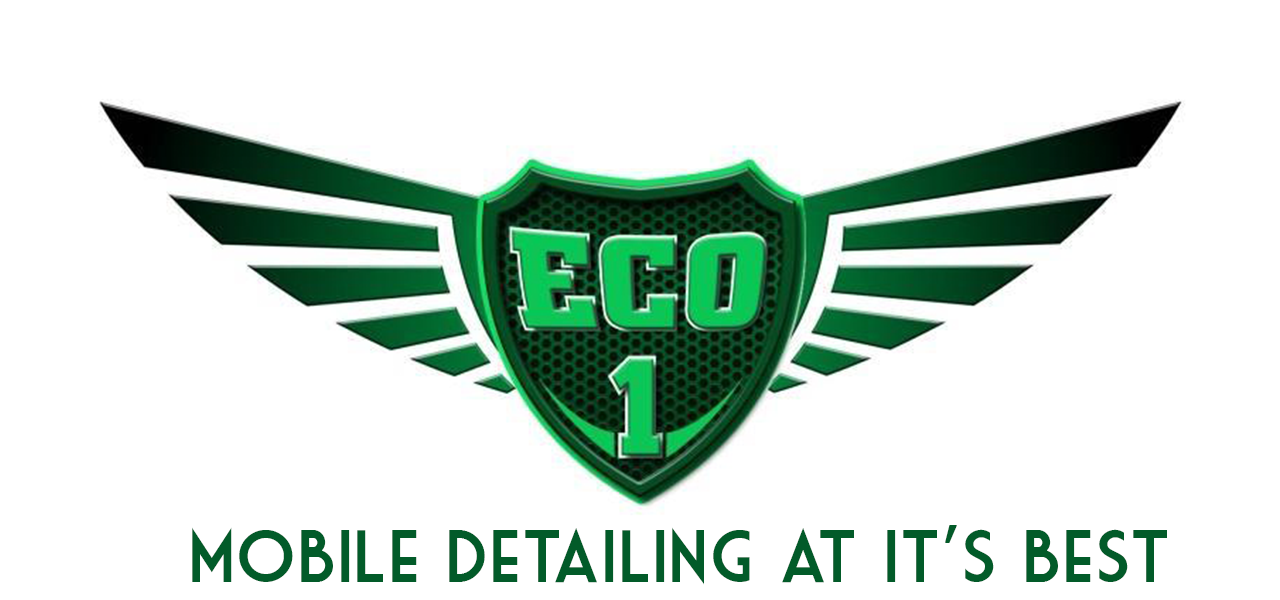
<style>
.page{position:relative;width:1280px;height:600px;background:#ffffff}
.page>*{position:absolute;margin:0}
.t1{font:72px "MarketDeco";color:#025b29}
</style>
<div class="page">
<p class="t1" style="left:192px;top:525px;width:975px;height:60px">mobile detailing at it’s best</p>
</div>
